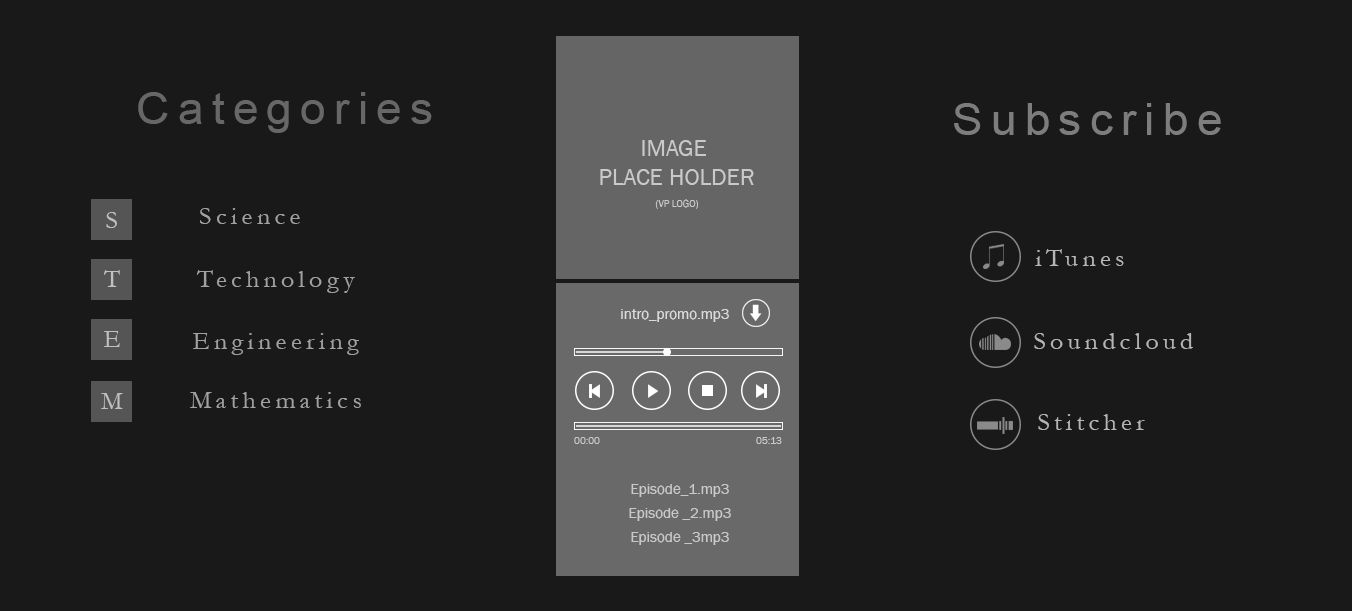
<style>
.page{position:relative;width:1352px;height:611px;background:#191919}
.page>*{position:absolute;margin:0}
.t1{font:44.5px "ArialMT";letter-spacing:0.18em;color:#676767;scale:1.03 1}
.t2{font:44.5px "ArialMT";letter-spacing:0.18em;color:#7d7d7d;scale:1.03 1}
.t3{font:24px "FranklinGothic-Book";color:#c9c9c9;text-transform:uppercase}
.t4{font:24.8px "Garamond";letter-spacing:0.18em;color:#a1a1a1;scale:1.03 1}
.t5{font:10px "FranklinGothic-Book";color:#c9c9c9;text-transform:uppercase}
.t6{font:24.8px "Garamond";letter-spacing:0.18em;color:#c0c0c0;scale:1.03 1}
.t7{font:24.8px "Garamond";letter-spacing:0.18em;color:#b5b5b5;scale:1.03 1}
.t8{font:15px "FranklinGothic-Book";color:#dadada}
.t9{font:15px "FranklinGothic-Book";color:#c9c9c9}
</style>
<div class="page">
<p class="t1" style="left:138px;top:92px;width:294px;height:41px">Categories</p>
<p class="t2" style="left:954px;top:103px;width:267px;height:32px">Subscribe</p>
<p class="t3" style="left:600px;top:140px;width:154px;height:45px;text-align:center">image <br>place holder</p>
<p class="t4" style="left:200px;top:208px;width:100px;height:16px">Science</p>
<p class="t5" style="left:655px;top:199px;width:43px;height:10px">(vp logo)</p>
<p class="t6" style="left:106px;top:212px;width:11px;height:16px">S</p>
<p class="t7" style="left:1035px;top:249px;width:89px;height:17px">iTunes</p>
<p class="t6" style="left:103px;top:270px;width:17px;height:17px">T</p>
<p class="t4" style="left:196px;top:270px;width:159px;height:23px">Technology</p>
<p class="t8" style="left:621px;top:309px;width:108px;height:13px">intro_promo.mp3</p>
<p class="t6" style="left:104px;top:331px;width:16px;height:16px">E</p>
<p class="t4" style="left:193px;top:333px;width:166px;height:22px">Engineering</p>
<p class="t7" style="left:1034px;top:333px;width:159px;height:16px">Soundcloud</p>
<p class="t6" style="left:101px;top:393px;width:22px;height:16px">M</p>
<p class="t4" style="left:190px;top:392px;width:171px;height:16px">Mathematics</p>
<p class="t7" style="left:1038px;top:414px;width:107px;height:16px">Stitcher</p>
<p class="t5" style="left:574px;top:437px;width:26px;height:7px">00:00</p>
<p class="t5" style="left:756px;top:437px;width:26px;height:7px">05:13</p>
<p class="t9" style="left:631px;top:484px;width:98px;height:13px">Episode_1.mp3</p>
<p class="t9" style="left:629px;top:508px;width:102px;height:13px">Episode _2.mp3</p>
<p class="t9" style="left:631px;top:532px;width:98px;height:13px">Episode _3mp3</p>
</div>
